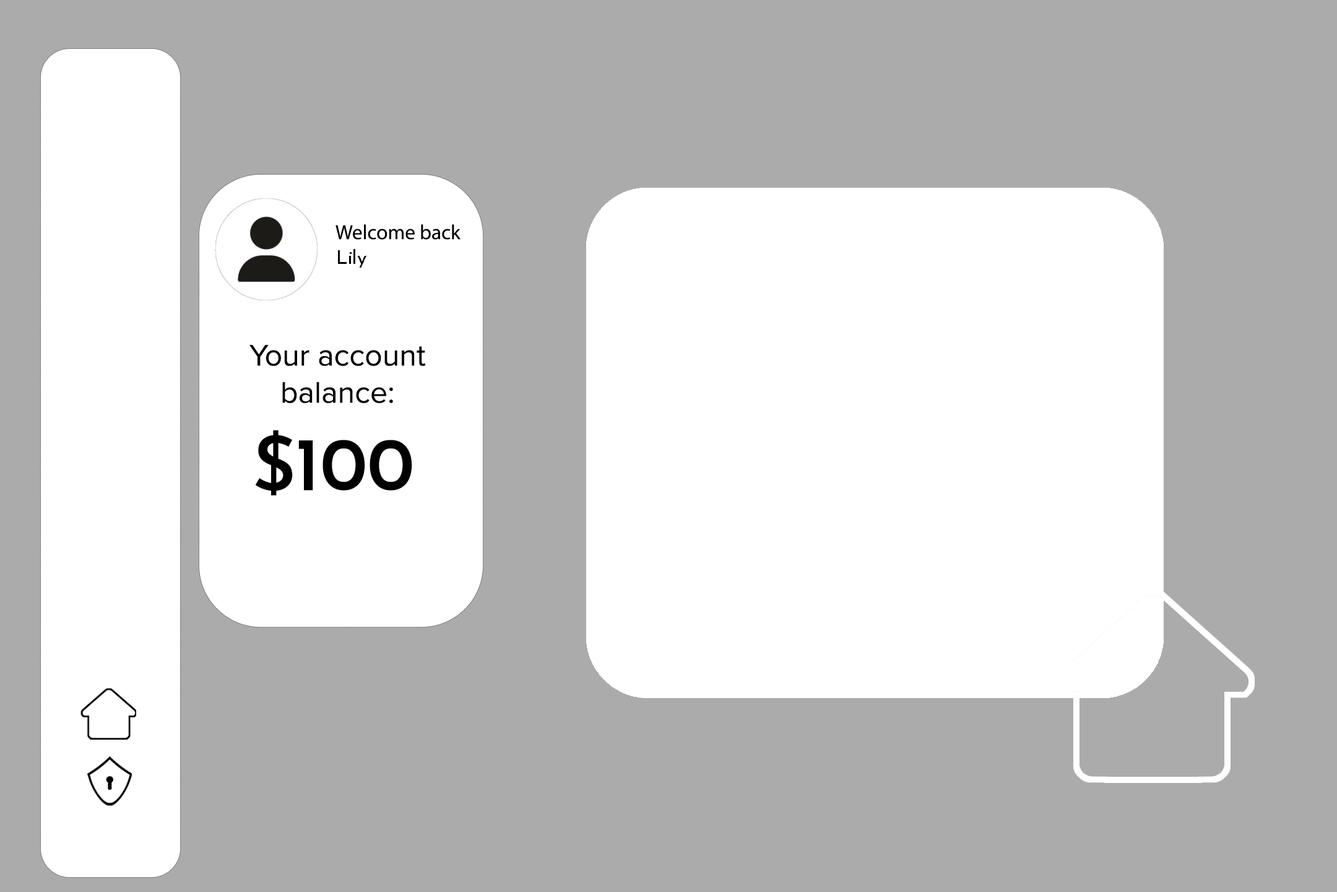
<style>
.page{position:relative;width:1337px;height:892px;background:#acabab}
.page>*{position:absolute;margin:0}
.t1{font:20.6px "MyriadPro-Regular";color:#000000}
.t2{font:18.9px "JosefinSansRoman-Regular";color:#000000}
.t3{font:31px "ProximaNova-Regular";color:#000000}
.t4{font:75.2px "JosefinSansRoman-SemiBold";color:#000000}
</style>
<div class="page">
<p class="t1" style="left:336px;top:224px;width:125px;height:16px">Welcome back</p>
<p class="t2" style="left:338px;top:249px;width:29px;height:18px">Lily</p>
<p class="t3" style="left:250px;top:344px;width:176px;height:59px;text-align:center">Your account<br>balance:</p>
<p class="t4" style="left:255px;top:430px;width:157px;height:65px">$100</p>
</div>
